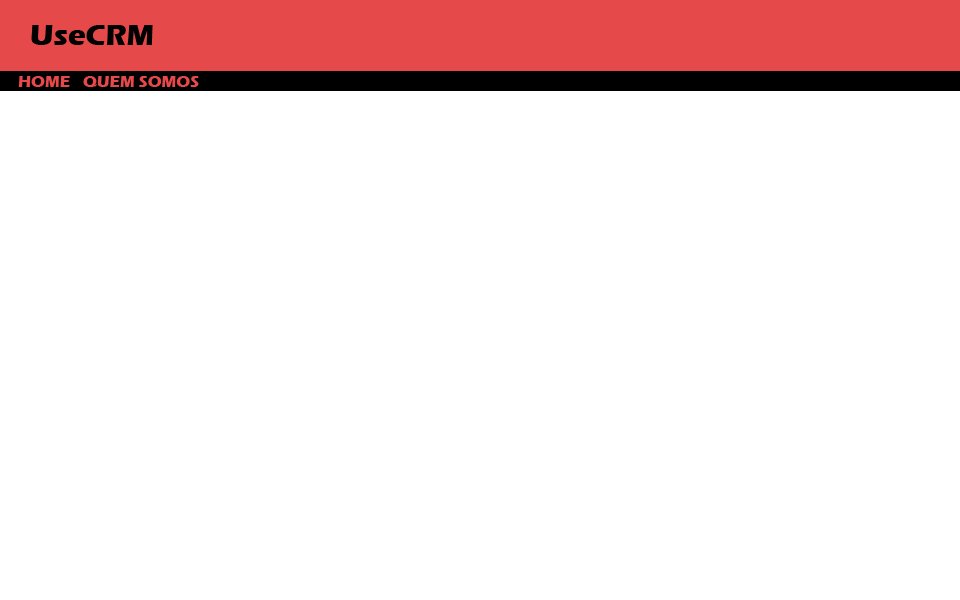
<style>
.page{position:relative;width:960px;height:600px;background:#ffffff}
.page>*{position:absolute;margin:0}
.t1{font:30px "ErasITC-Bold";color:#010101}
.t2{font:16px "ErasITC-Bold";color:#e64949}
</style>
<div class="page">
<p class="t1" style="left:31px;top:25px;width:122px;height:20px">UseCRM</p>
<p class="t2" style="left:18px;top:76px;width:52px;height:11px">HOME</p>
<p class="t2" style="left:83px;top:76px;width:116px;height:11px">QUEM SOMOS</p>
</div>
